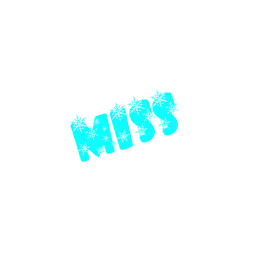
<style>
.page{position:relative;width:255px;height:255px;background:#ffffff}
.page>*{position:absolute;margin:0}
.t1{font:64.6px "winterflakes";color:#0ffcff;scale:0.92 1}
</style>
<div class="page">
<p class="t1" style="left:70px;top:89px;width:109px;height:73px;rotate:-18deg">MISS</p>
</div>
